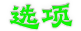
<style>
.page{position:relative;width:81px;height:31px;background:#ffffff}
.page>*{position:absolute;margin:0}
.t1{font:32.5px "GraveBustedStoneLishuSCRoughlyC";color:#0ffc03}
</style>
<div class="page">
<p class="t1" style="left:9px;top:3px;width:63px;height:27px;rotate:-1deg">选项</p>
</div>
